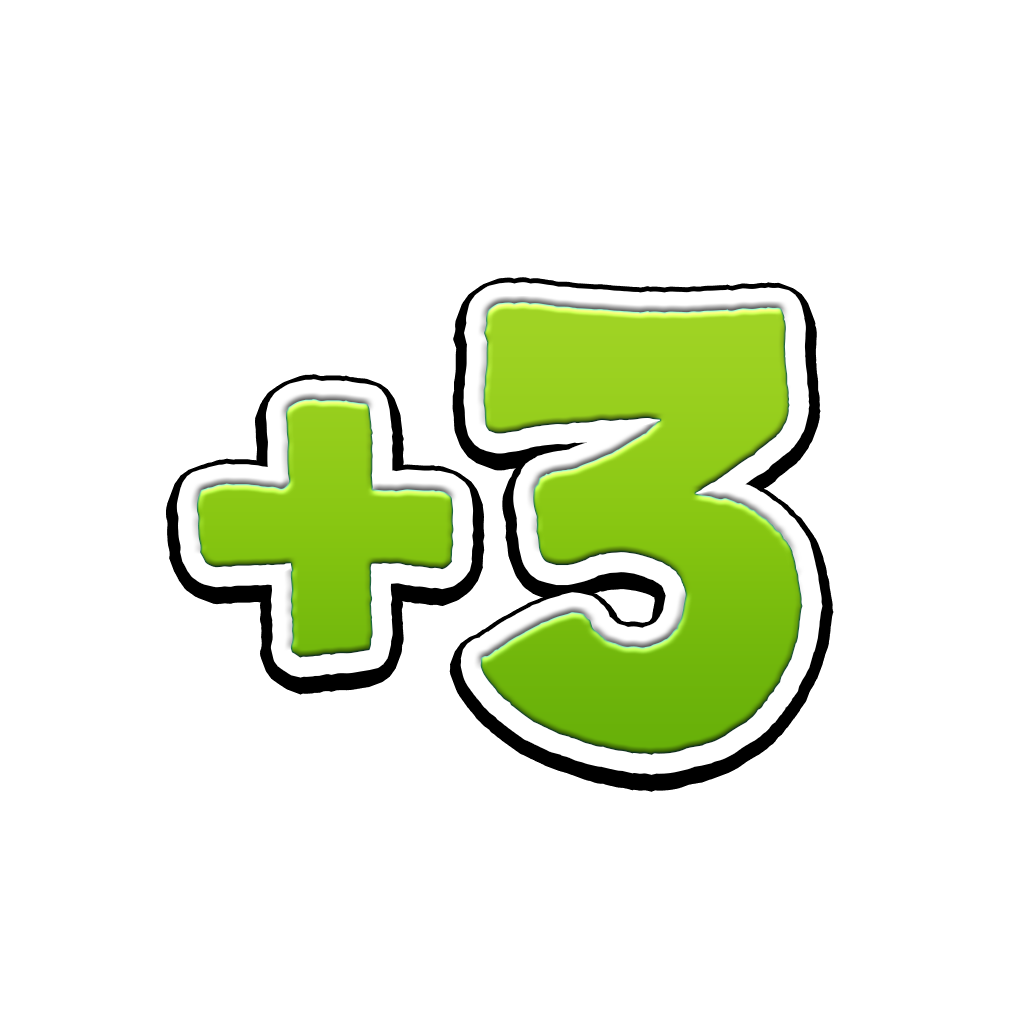
<style>
.page{position:relative;width:1024px;height:1024px;background:#ffffff}
.page>*{position:absolute;margin:0}
.t1{font:600px "Skranji-Bold";color:#87c611}
</style>
<div class="page">
<p class="t1" style="left:196px;top:302px;width:607px;height:453px">+3</p>
</div>
